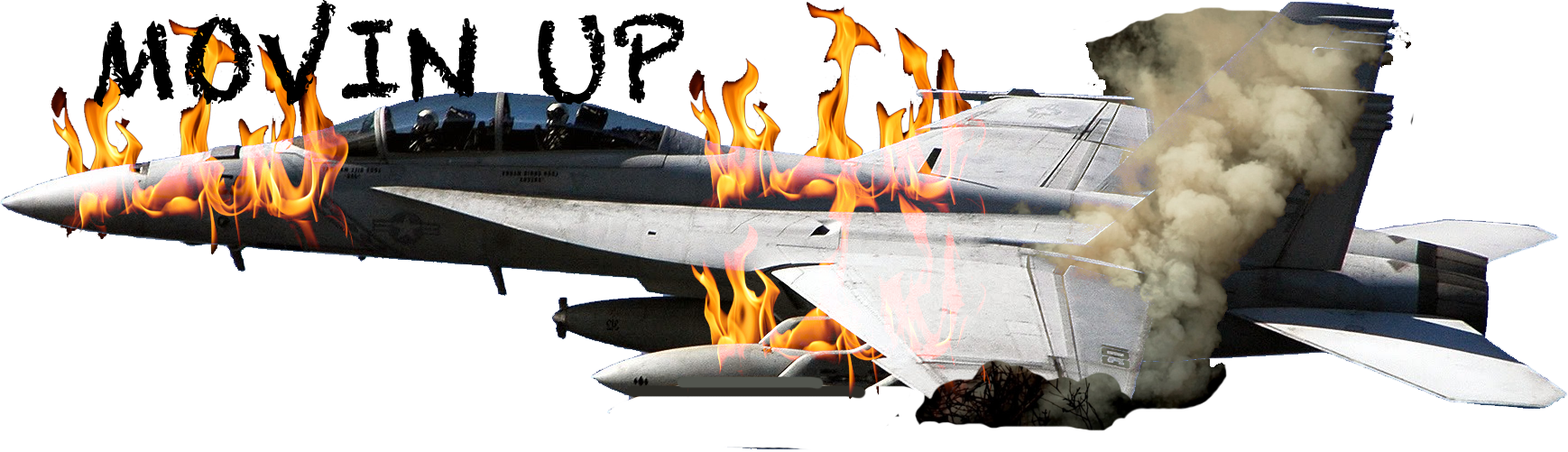
<style>
.page{position:relative;width:1568px;height:452px;background:#ffffff}
.page>*{position:absolute;margin:0}
.t1{font:108.3px "Chalkduster";color:#000000}
</style>
<div class="page">
<p class="t1" style="left:94px;top:0px;width:591px;height:107px">MOVIN UP</p>
</div>
